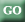
<style>
.page{position:relative;width:25px;height:22px}
.page>*{position:absolute;margin:0}
.t1{font:12px "TimesNewRomanPS-BoldMT";color:#ffffff}
</style>
<div class="page">
<p class="t1" style="left:3px;top:6px;width:19px;height:9px">GO</p>
</div>
